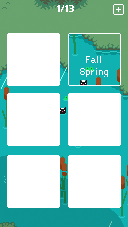
<style>
.page{position:relative;width:128px;height:227px;background:#ffffff}
.page>*{position:absolute;margin:0}
.t1{font:11px "OrangeKid-Regular";letter-spacing:0.095em;color:#ffffff}
</style>
<div class="page">
<p class="t1" style="left:86px;top:56px;width:15px;height:7px">Fall</p>
<p class="t1" style="left:80px;top:68px;width:28px;height:9px">Spring</p>
</div>
